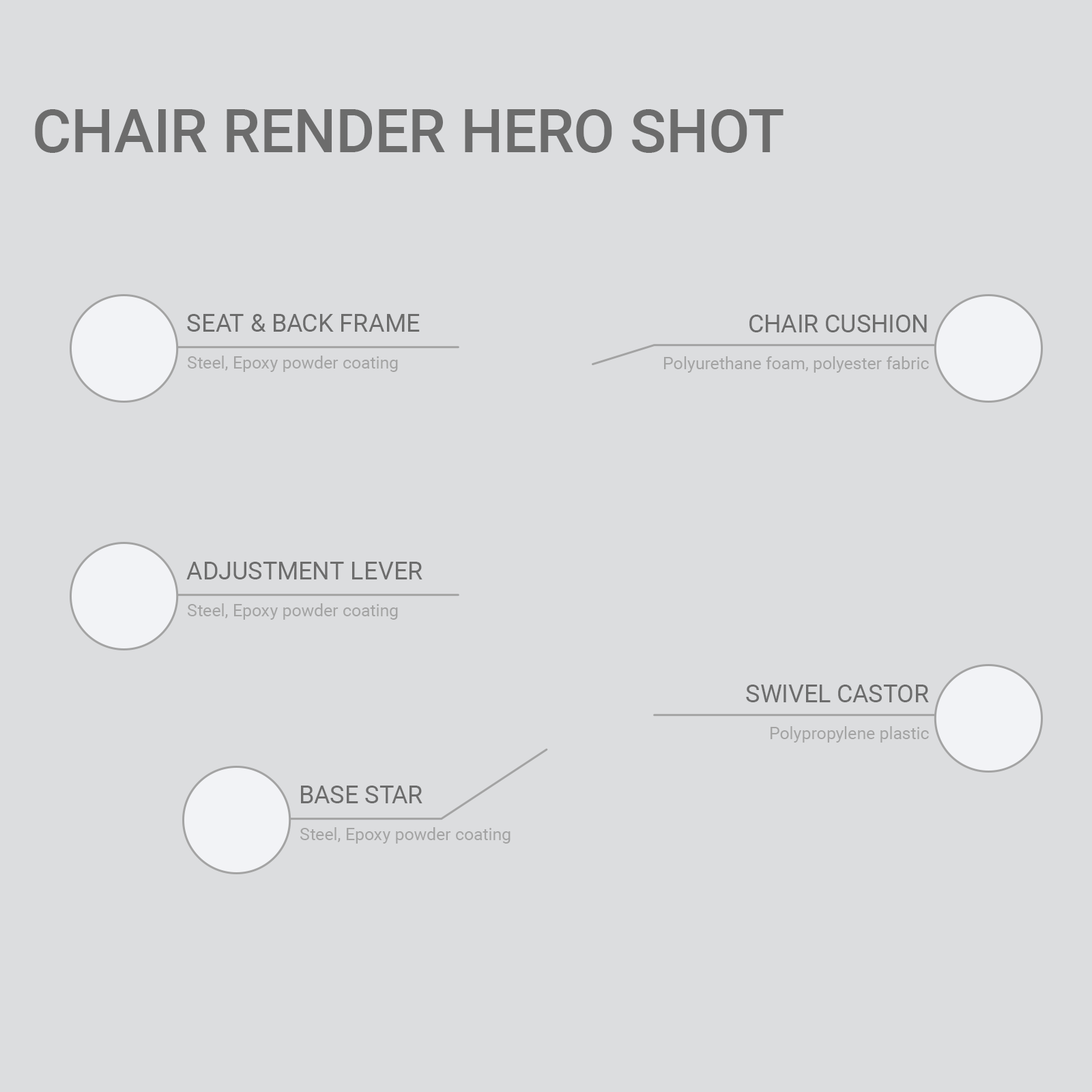
<style>
.page{position:relative;width:1092px;height:1092px;background:#dcdddf}
.page>*{position:absolute;margin:0}
.t1{font:60px "Roboto-Medium";color:#6c6c6c}
.t2{font:24.4px "Roboto-Regular";color:#6c6c6c}
.t3{font:24.5px "Roboto-Regular";color:#6c6c6c}
.t4{font:17px "Roboto-Regular";color:#a3a3a3}
.t5{font:17.1px "Roboto-Regular";color:#a3a3a3}
</style>
<div class="page">
<p class="t1" style="left:35px;top:109px;width:748px;height:44px">CHAIR RENDER HERO SHOT</p>
<p class="t2" style="left:187px;top:314px;width:233px;height:18px">SEAT &amp; BACK FRAME</p>
<p class="t3" style="left:749px;top:315px;width:178px;height:17px">CHAIR CUSHION</p>
<p class="t4" style="left:188px;top:356px;width:210px;height:16px">Steel, Epoxy powder coating</p>
<p class="t5" style="left:664px;top:356px;width:265px;height:17px">Polyurethane foam, polyester fabric</p>
<p class="t2" style="left:186px;top:562px;width:236px;height:17px">ADJUSTMENT LEVER</p>
<p class="t4" style="left:188px;top:603px;width:210px;height:17px">Steel, Epoxy powder coating</p>
<p class="t3" style="left:746px;top:685px;width:183px;height:17px">SWIVEL CASTOR</p>
<p class="t5" style="left:771px;top:726px;width:158px;height:17px">Polypropylene plastic</p>
<p class="t2" style="left:301px;top:786px;width:121px;height:17px">BASE STAR</p>
<p class="t4" style="left:300px;top:827px;width:211px;height:17px">Steel, Epoxy powder coating</p>
</div>
